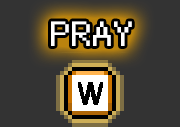
<style>
.page{position:relative;width:180px;height:127px;background:#333333}
.page>*{position:absolute;margin:0}
.t1{font:49px "Silver";color:#ffffff;scale:1.3 1}
</style>
<div class="page">
<p class="t1" style="left:51px;top:21px;width:81px;height:25px">PRAY</p>
</div>
